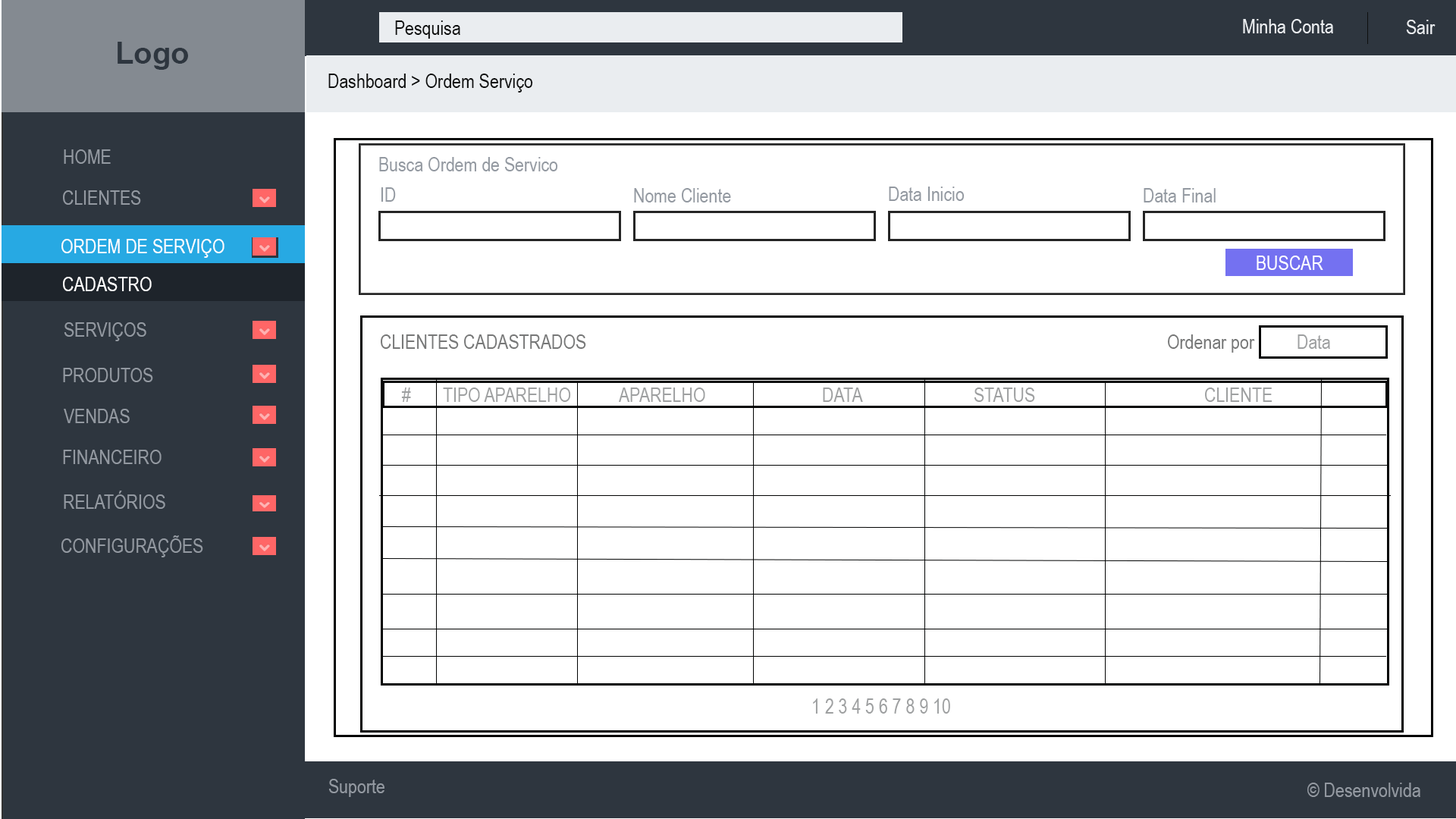
<style>
.page{position:relative;width:1456px;height:819px;background:#ffffff}
.page>*{position:absolute;margin:0}
.t1{font:19.7px "ArialNarrow";color:#0e0f0f}
.t2{font:19.7px "ArialNarrow";color:#eaedf0}
.t3{font:30.3px "Arial-BoldMT";color:#2e363f}
.t4{font:19.7px "ArialNarrow";color:#9399a1}
.t5{font:19.7px "ArialNarrow";color:#ffffff}
.t6{font:19.7px "ArialNarrow";color:#777878}
.t7{font:19.7px "ArialNarrow";color:#9ea0a1}
</style>
<div class="page">
<p class="t1" style="left:395px;top:20px;width:65px;height:19px">Pesquisa</p>
<p class="t2" style="left:1243px;top:19px;width:90px;height:14px">Minha Conta</p>
<p class="t2" style="left:1406px;top:20px;width:30px;height:14px">Sair</p>
<p class="t3" style="left:118px;top:42px;width:70px;height:28px">Logo</p>
<p class="t1" style="left:328px;top:74px;width:205px;height:19px">Dashboard &gt; Ordem Serviço</p>
<p class="t4" style="left:64px;top:149px;width:47px;height:15px">HOME</p>
<p class="t4" style="left:379px;top:157px;width:179px;height:14px">Busca Ordem de Servico</p>
<p class="t4" style="left:63px;top:190px;width:78px;height:15px">CLIENTES</p>
<p class="t4" style="left:381px;top:187px;width:15px;height:15px">ID</p>
<p class="t4" style="left:634px;top:188px;width:97px;height:14px">Nome Cliente</p>
<p class="t4" style="left:889px;top:187px;width:76px;height:14px">Data Inicio</p>
<p class="t4" style="left:1144px;top:188px;width:72px;height:14px">Data Final</p>
<p class="t5" style="left:61px;top:239px;width:163px;height:19px">ORDEM DE SERVIÇO</p>
<p class="t5" style="left:1257px;top:256px;width:66px;height:14px">BUSCAR</p>
<p class="t5" style="left:63px;top:277px;width:89px;height:14px">CADASTRO</p>
<p class="t4" style="left:64px;top:322px;width:82px;height:19px">SERVIÇOS</p>
<p class="t6" style="left:381px;top:334px;width:205px;height:15px">CLIENTES CADASTRADOS</p>
<p class="t6" style="left:1168px;top:334px;width:87px;height:19px">Ordenar por</p>
<p class="t7" style="left:1297px;top:334px;width:33px;height:15px">Data</p>
<p class="t4" style="left:63px;top:368px;width:90px;height:14px">PRODUTOS</p>
<p class="t7" style="left:401px;top:388px;width:10px;height:14px">#</p>
<p class="t7" style="left:443px;top:388px;width:128px;height:14px">TIPO APARELHO</p>
<p class="t7" style="left:619px;top:388px;width:86px;height:14px">APARELHO</p>
<p class="t7" style="left:823px;top:388px;width:40px;height:14px">DATA</p>
<p class="t7" style="left:974px;top:388px;width:61px;height:14px">STATUS</p>
<p class="t7" style="left:1205px;top:388px;width:67px;height:14px">CLIENTE</p>
<p class="t4" style="left:64px;top:409px;width:66px;height:14px">VENDAS</p>
<p class="t4" style="left:63px;top:450px;width:99px;height:14px">FINANCEIRO</p>
<p class="t4" style="left:64px;top:491px;width:101px;height:18px">RELATÓRIOS</p>
<p class="t4" style="left:61px;top:535px;width:142px;height:22px">CONFIGURAÇÕES</p>
<p class="t7" style="left:813px;top:698px;width:137px;height:16px">1 2 3 4 5 6 7 8 9 10</p>
<p class="t4" style="left:328px;top:779px;width:56px;height:18px">Suporte</p>
<p class="t4" style="left:1307px;top:783px;width:113px;height:14px">© Desenvolvida</p>
</div>
